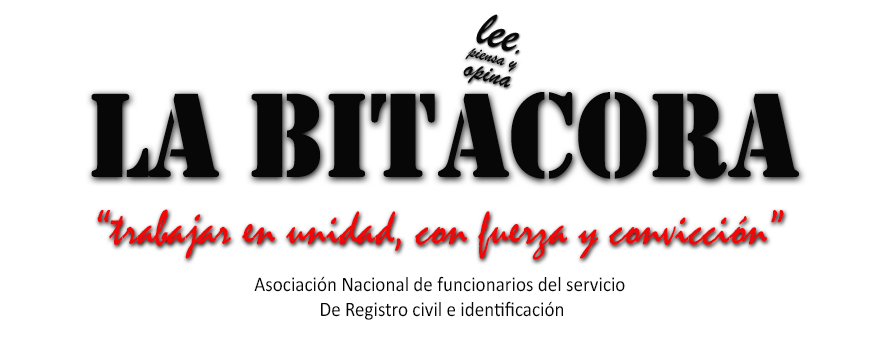
<style>
.page{position:relative;width:880px;height:340px;background:#ffffff}
.page>*{position:absolute;margin:0}
.t1{font:125px "Stencil";color:#070707;scale:0.92 1}
.t2{font:50px "Mistral";color:#f20707;scale:0.92 1}
.t3{font:20.8px "Calibri";color:#070707;scale:0.92 1}
</style>
<div class="page">
<p class="t1" style="left:91px;top:92px;width:708px;height:87px">LA BITACORA</p>
<p class="t2" style="left:97px;top:209px;width:687px;height:51px">“trabajar en unidad, con fuerza y convicción”</p>
<p class="t3" style="left:254px;top:276px;width:371px;height:44px;text-align:center">Asociación Nacional de funcionarios del servicio <br>De Registro civil e identificación</p>
</div>
